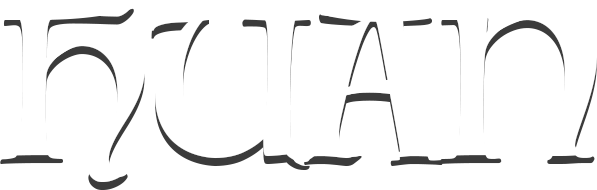
<style>
.page{position:relative;width:597px;height:190px;background:#ffffff}
.page>*{position:absolute;margin:0}
.t1{font:200px "Luminari-Regular";color:#ffffff}
</style>
<div class="page">
<p class="t1" style="left:0px;top:8px;width:597px;height:182px">HUAN</p>
</div>
